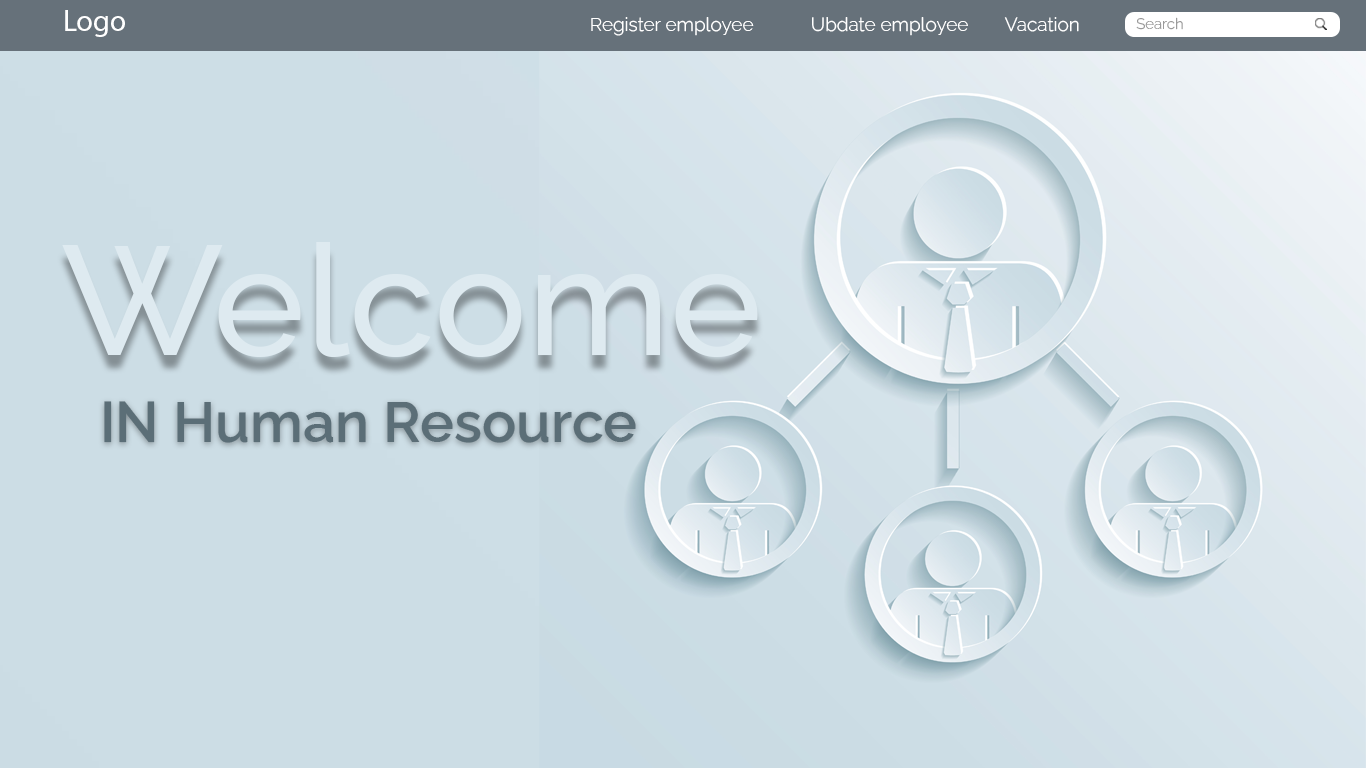
<style>
.page{position:relative;width:1366px;height:768px;background:#ccdde5}
.page>*{position:absolute;margin:0}
.t1{font:30px "MyriadPro-Regular";color:#ffffff}
.t2{font:19px "RalewayRoman-Light";color:#ffffff}
.t3{font:15px "RalewayRoman-Light";color:#9a9a9a}
.t4{font:155px "RalewayRoman-Medium";color:#deeaf0}
.t5{font:57px "RalewayRoman-SemiBold";color:#5b6e77}
</style>
<div class="page">
<p class="t1" style="left:65px;top:10px;width:60px;height:27px">Logo</p>
<p class="t2" style="left:591px;top:17px;width:163px;height:19px">Register employee</p>
<p class="t2" style="left:812px;top:17px;width:156px;height:19px">Ubdate employee</p>
<p class="t2" style="left:1004px;top:17px;width:75px;height:15px">Vacation</p>
<p class="t3" style="left:1136px;top:17px;width:47px;height:13px">Search</p>
<p class="t4" style="left:62px;top:242px;width:696px;height:115px">Welcome</p>
<p class="t5" style="left:104px;top:401px;width:532px;height:42px">IN Human Resource</p>
</div>
